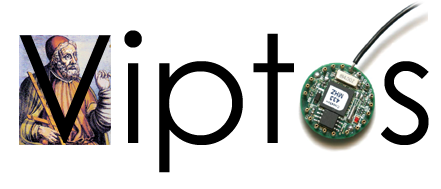
<style>
.page{position:relative;width:441px;height:189px;background:#ffffff}
.page>*{position:absolute;margin:0}
.t1{font:150px "CenturyGothic";letter-spacing:-0.025em;color:#000000}
.t2{font:150px "CenturyGothic";letter-spacing:0.02em;color:#000000;scale:0.95 1}
.t3{font:150px "CenturyGothic";color:#000000}
</style>
<div class="page">
<p class="t1" style="left:19px;top:30px;width:410px;height:143px"><span class="t2">V</span><span class="t3">i</span>pt <span class="t3"> s</span></p>
</div>
